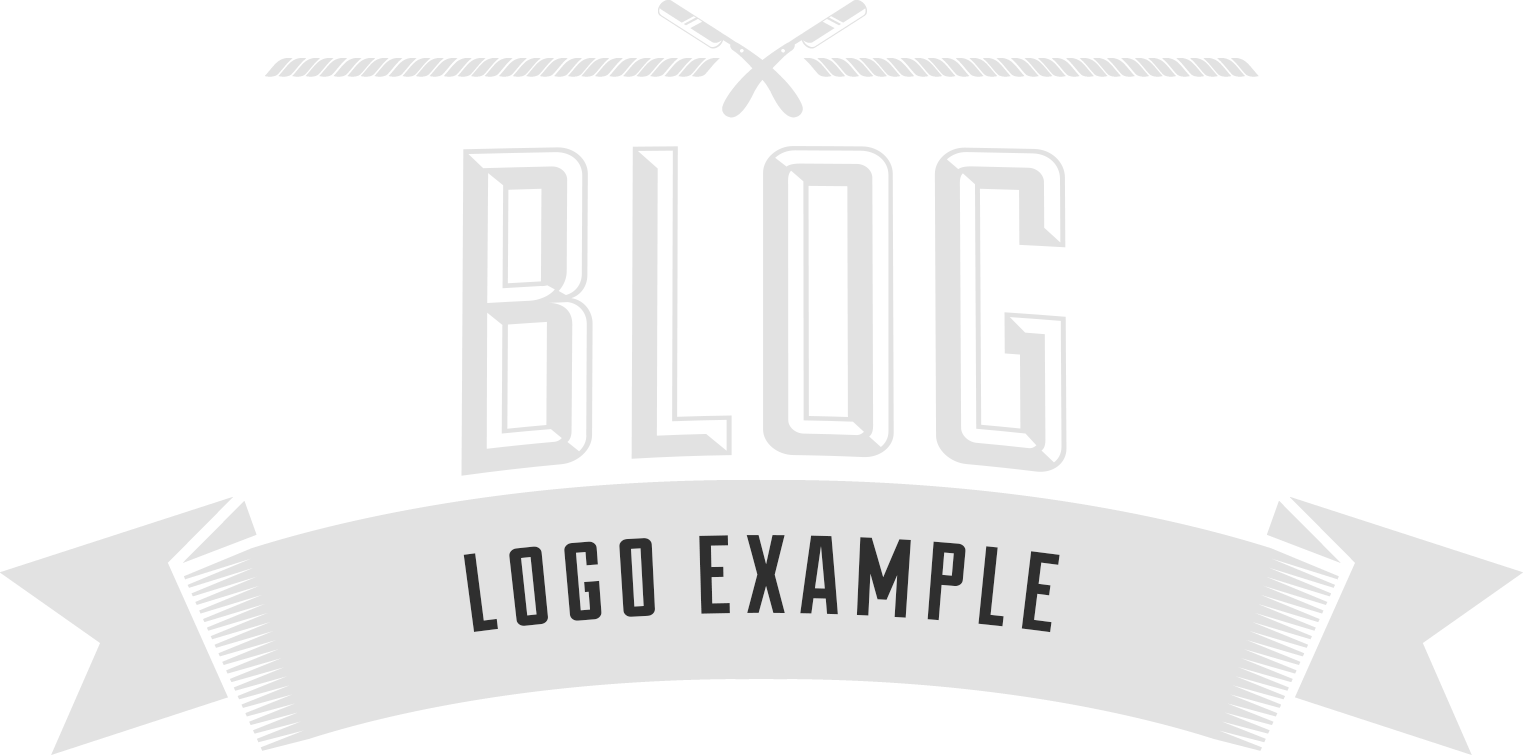
<style>
.page{position:relative;width:1523px;height:755px;background:#ffffff}
.page>*{position:absolute;margin:0}
.t1{font:510px "Duke-Regular";color:#e2e2e2}
.t2{font:111.1px "Duke-Fill";letter-spacing:0.1em;color:#2f2f2f}
</style>
<div class="page">
<p class="t1" style="left:461px;top:146px;width:606px;height:330px">BLOG</p>
<p class="t2" style="left:463px;top:535px;width:597px;height:98px">LOGO EXAMPLE</p>
</div>
